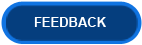
<style>
.page{position:relative;width:142px;height:45px;background:#053e7e}
.page>*{position:absolute;margin:0}
.t1{font:13px "Arial-BoldMT";color:#ffffff}
</style>
<div class="page">
<p class="t1" style="left:34px;top:17px;width:72px;height:10px">FEEDBACK</p>
</div>
